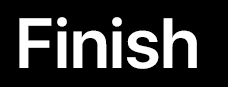
<style>
.page{position:relative;width:228px;height:87px;background:#000000}
.page>*{position:absolute;margin:0}
.t1{font:70.8px "SFProDisplay-Semibold";color:#ffffff}
</style>
<div class="page">
<p class="t1" style="left:19px;top:17px;width:178px;height:52px">Finish</p>
</div>
